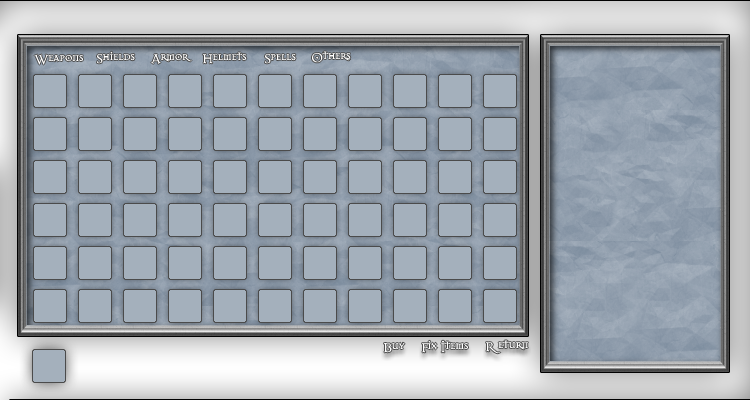
<style>
.page{position:relative;width:750px;height:400px;background:#a4b0bc}
.page>*{position:absolute;margin:0}
.t1{font:14px "Dark11";color:#ffffff}
</style>
<div class="page">
<p class="t1" style="left:34px;top:54px;width:50px;height:11px">Weapons</p>
<p class="t1" style="left:97px;top:51px;width:38px;height:13px">Shields</p>
<p class="t1" style="left:151px;top:54px;width:41px;height:10px">Armor</p>
<p class="t1" style="left:203px;top:52px;width:44px;height:12px">Helmets</p>
<p class="t1" style="left:265px;top:54px;width:31px;height:10px">Spells</p>
<p class="t1" style="left:312px;top:51px;width:39px;height:12px">Others</p>
<p class="t1" style="left:384px;top:342px;width:21px;height:11px">Buy</p>
<p class="t1" style="left:422px;top:340px;width:46px;height:13px">Fix Items</p>
<p class="t1" style="left:486px;top:340px;width:42px;height:14px">R eturn</p>
</div>
